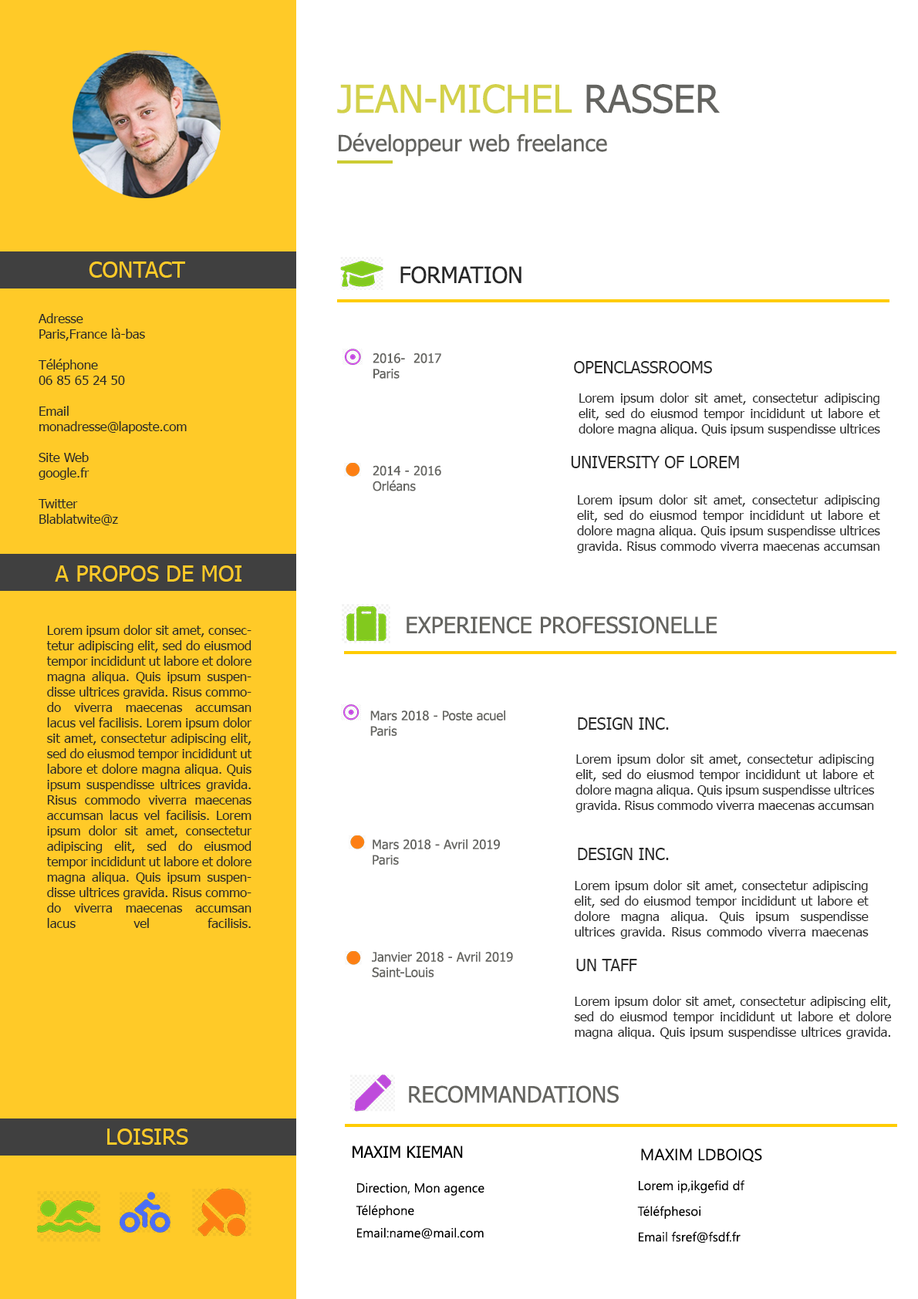
<style>
.page{position:relative;width:918px;height:1299px;background:#ffffff}
.page>*{position:absolute;margin:0}
.t1{font:22.5px/38.6px "Tahoma";color:#646460}
.t2{font:38.6px/38.6px "Tahoma";color:#d3d14a}
.t3{font:38.6px/38.6px "Tahoma";color:#646460}
.t4{font:22.5px "Tahoma";color:#ffca28}
.t5{font:22.5px "Tahoma";color:#282828}
.t6{font:12.9px "Tahoma";color:#282828}
.t7{font:12.9px "Tahoma";color:#646460}
.t8{font:16.1px "Tahoma";color:#282828}
.t9{font:22.5px "Tahoma";color:#646460}
.t10{font:16.1px "Tahoma";color:#000000}
.t11{font:16.1px "YuGothicUI-Regular";color:#000000}
.t12{font:12.9px/25.7px "YuGothicUI-Regular";color:#000000}
.t13{font:12.9px/22.5px "YuGothicUI-Regular";color:#000000}
</style>
<div class="page">
<p class="t1" style="left:337px;top:84px;width:383px;height:73px"><span class="t2">JEAN-MICHEL </span><span class="t3">RASSER<br></span>Développeur web freelance</p>
<p class="t4" style="left:89px;top:262px;width:96px;height:16px">CONTACT</p>
<p class="t5" style="left:400px;top:266px;width:121px;height:18px">FORMATION</p>
<p class="t6" style="left:38px;top:313px;width:149px;height:212px">Adresse<br>Paris,France là-bas<br><br>Téléphone<br>06 85 65 24 50<br><br>Email<br>monadresse@laposte.com<br><br>Site Web<br>google.fr<br><br>Twitter<br>Blablatwite@z</p>
<p class="t7" style="left:373px;top:353px;width:68px;height:26px">2016-  2017<br>Paris</p>
<p class="t8" style="left:574px;top:361px;width:138px;height:12px">OPENCLASSROOMS</p>
<p class="t6" style="left:579px;top:393px;width:301px;height:43px;text-align:justify">Lorem ipsum dolor sit amet, consectetur adipiscing elit, sed do eiusmod tempor incididunt ut labore et dolore magna aliqua. Quis ipsum suspendisse ultrices gravida. Risus commodo viverra maecenas accumsan lacus vel facilisis.</p>
<p class="t8" style="left:571px;top:456px;width:168px;height:12px">UNIVERSITY OF LOREM</p>
<p class="t7" style="left:373px;top:465px;width:68px;height:26px">2014 - 2016<br>Orléans</p>
<p class="t6" style="left:577px;top:494px;width:303px;height:59px;text-align:justify">Lorem ipsum dolor sit amet, consectetur adipiscing elit, sed do eiusmod tempor incididunt ut labore et dolore magna aliqua. Quis ipsum suspendisse ultrices gravida. Risus commodo viverra maecenas accumsan lacus vel facilisis.</p>
<p class="t4" style="left:55px;top:565px;width:186px;height:17px">A PROPOS DE MOI</p>
<p class="t9" style="left:407px;top:616px;width:310px;height:18px">EXPERIENCE PROFESSIONELLE</p>
<p class="t6" style="left:46px;top:625px;width:206px;height:303px;text-align:justify">Lorem ipsum dolor sit amet, consectetur adipiscing elit, sed do eiusmod tempor incididunt ut labore et dolore magna aliqua. Quis ipsum suspendisse ultrices gravida. Risus commodo viverra maecenas accumsan lacus vel facilisis. Lorem ipsum dolor sit amet, consectetur adipiscing elit, sed do eiusmod tempor incididunt ut labore et dolore magna aliqua. Quis ipsum suspendisse ultrices gravida. Risus commodo viverra maecenas accumsan lacus vel facilisis. Lorem ipsum dolor sit amet, consectetur adipiscing elit, sed do eiusmod tempor incididunt ut labore et dolore magna aliqua. Quis ipsum suspendisse ultrices gravida. Risus commodo viverra maecenas accumsan lacus vel facilisis.</p>
<p class="t7" style="left:370px;top:710px;width:135px;height:26px">Mars 2018 - Poste acuel<br>Paris</p>
<p class="t8" style="left:578px;top:717px;width:91px;height:13px">DESIGN INC.</p>
<p class="t6" style="left:575px;top:754px;width:300px;height:58px;text-align:justify">Lorem ipsum dolor sit amet, consectetur adipiscing elit, sed do eiusmod tempor incididunt ut labore et dolore magna aliqua. Quis ipsum suspendisse ultrices gravida. Risus commodo viverra maecenas accumsan lacus vel facilisis.</p>
<p class="t7" style="left:373px;top:839px;width:127px;height:26px">Mars 2018 - Avril 2019<br>Paris</p>
<p class="t8" style="left:578px;top:848px;width:91px;height:12px">DESIGN INC.</p>
<p class="t6" style="left:574px;top:880px;width:295px;height:59px;text-align:justify">Lorem ipsum dolor sit amet, consectetur adipiscing elit, sed do eiusmod tempor incididunt ut labore et dolore magna aliqua. Quis ipsum suspendisse ultrices gravida. Risus commodo viverra maecenas accumsan lacus vel facilisis.</p>
<p class="t7" style="left:372px;top:951px;width:141px;height:26px">Janvier 2018 - Avril 2019<br>Saint-Louis</p>
<p class="t8" style="left:576px;top:959px;width:61px;height:12px">UN TAFF</p>
<p class="t6" style="left:574px;top:996px;width:318px;height:43px;text-align:justify">Lorem ipsum dolor sit amet, consectetur adipiscing elit, sed do eiusmod tempor incididunt ut labore et dolore magna aliqua. Quis ipsum suspendisse ultrices gravida. Risus commodo viverra maecenas accumsan lacus vel facilisis.</p>
<p class="t9" style="left:409px;top:1085px;width:210px;height:18px">RECOMMANDATIONS</p>
<p class="t4" style="left:107px;top:1129px;width:81px;height:16px">LOISIRS</p>
<p class="t10" style="left:353px;top:1146px;width:110px;height:12px">MAXIM KIEMAN</p>
<p class="t11" style="left:641px;top:1149px;width:121px;height:13px">MAXIM LDBOIQS</p>
<p class="t12" style="left:637px;top:1180px;width:107px;height:63px"><span class="t13">L</span>orem ip,ikgefid df<br>Téléfphesoi<br>Email fsref@fsdf.fr</p>
<p class="t13" style="left:356px;top:1183px;width:128px;height:56px">Direction, Mon agence<br>Téléphone<br>Email:name@mail.com</p>
</div>
